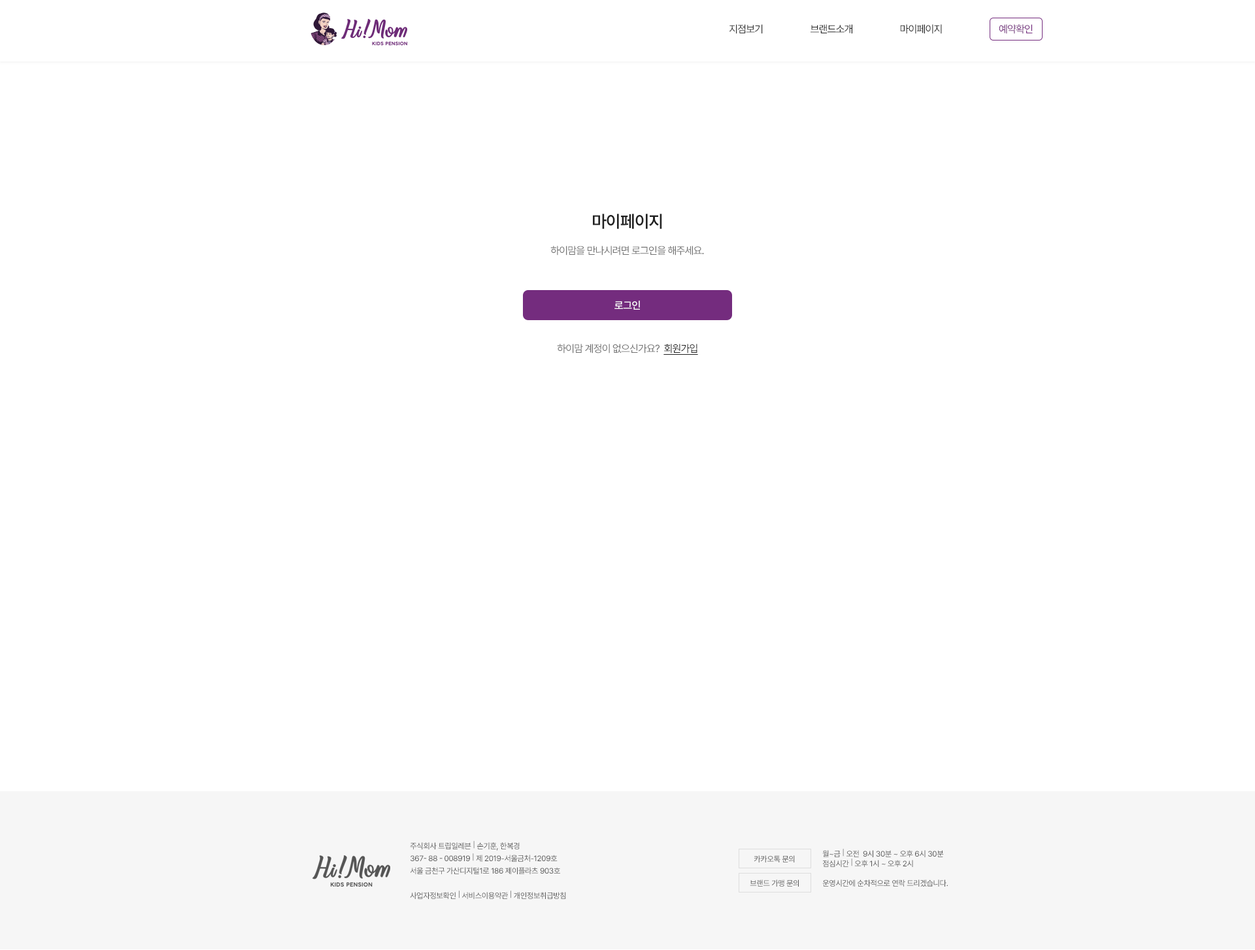
<style>
.page{position:relative;width:1255px;height:950px;background:#ffffff}
.page>*{position:absolute;margin:0}
.t1{font:10.5px "Pretendard-Regular";letter-spacing:-0.05em;color:#333333}
.t2{font:10.5px "Pretendard-Regular";letter-spacing:-0.05em;color:#222222}
.t3{font:10.5px "Pretendard-Regular";letter-spacing:-0.05em;color:#742c7e}
.t4{font:17px "Pretendard-SemiBold";letter-spacing:-0.025em;color:#222222;text-transform:uppercase}
.t5{font:10.5px "Pretendard-Regular";letter-spacing:-0.05em;color:#717171;text-transform:uppercase}
.t6{font:10.5px "Pretendard-Medium";letter-spacing:-0.025em;color:#ffffff;text-transform:uppercase}
.t7{font:10.5px "Pretendard-Regular";letter-spacing:-0.05em;color:#222222;text-transform:uppercase;text-decoration:underline}
.t8{font:7.8px/12.4px "Pretendard-Regular";letter-spacing:-0.025em;color:#555555}
.t9{font:7.8px "Pretendard-Regular";letter-spacing:-0.025em;color:#555555}
.t10{font:7.8px/9.8px "Pretendard-Regular";letter-spacing:-0.025em;color:#555555}
</style>
<div class="page">
<p class="t1" style="left:729px;top:24px;width:34px;height:10px">지점보기</p>
<p class="t2" style="left:810px;top:24px;width:42px;height:10px">브랜드소개</p>
<p class="t2" style="left:900px;top:24px;width:42px;height:10px">마이페이지</p>
<p class="t3" style="left:999px;top:24px;width:34px;height:10px">예약확인</p>
<p class="t4" style="left:593px;top:214px;width:69px;height:15px">마이페이지</p>
<p class="t5" style="left:550px;top:246px;width:154px;height:10px">하이맘을 만나시려면 로그인을 해주세요.</p>
<p class="t6" style="left:614px;top:301px;width:26px;height:9px">로그인</p>
<p class="t5" style="left:557px;top:344px;width:141px;height:11px">하이맘 계정이 없으신가요?  <span class="t7">회원가입</span></p>
<p class="t8" style="left:410px;top:841px;width:156px;height:58px">주식회사 트립일레븐 | 손기훈, 한복경<br>367- 88 - 008919 | 제 2019-서울금처-1209호<br>서울 금천구 가산디지털1로 186 제이플라츠 903호<br><br>사업자정보확인 | 서비스이용약관 | 개인정보취급방침</p>
<p class="t9" style="left:754px;top:856px;width:41px;height:7px">카카오톡 문의</p>
<p class="t10" style="left:822px;top:849px;width:122px;height:18px">월~금 | 오전  9시 30분 ~ 오후 6시 30분<br>점심시간 | 오후 1시 ~ 오후 2시</p>
<p class="t9" style="left:750px;top:880px;width:49px;height:7px">브랜드 가맹 문의</p>
<p class="t9" style="left:822px;top:880px;width:126px;height:7px">운영시간에 순차적으로 연락 드리겠습니다.</p>
</div>
